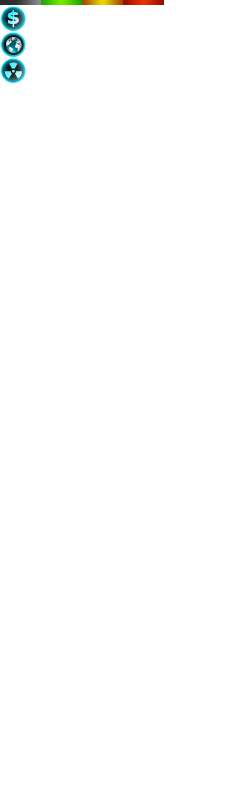
<style>
.page{position:relative;width:230px;height:787px;background:#ffffff}
.page>*{position:absolute;margin:0}
.t1{font:18.5px "Verdana-Bold";letter-spacing:0.025em}
</style>
<div class="page">
<p class="t1" style="left:7px;top:10px;width:12px;height:17px">$</p>
</div>
